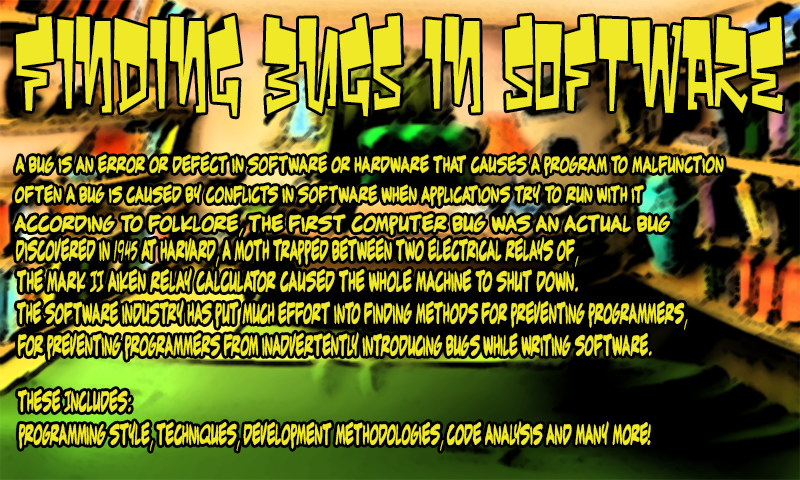
<style>
.page{position:relative;width:800px;height:480px;background:#000000}
.page>*{position:absolute;margin:0}
.t1{font:98.1px "Bomr";color:#f0e927;scale:0.64 1}
.t2{font:21.6px "adamwarren0.2";color:#f0e927;scale:0.57 1}
.t3{font:21.3px "adamwarren0.2";color:#f0e927;scale:0.77 1}
.t4{font:27px "adamwarren0.2";color:#f0e927;scale:0.42 1}
.t5{font:27px "adamwarren0.2";color:#f0e927;scale:0.45 1}
</style>
<div class="page">
<p class="t1" style="left:16px;top:15px;width:767px;height:102px">Finding bugs in software</p>
<p class="t2" style="left:15px;top:154px;width:709px;height:22px">A Bug is an error or defect in software or hardware that causes a program to malfunction</p>
<p class="t2" style="left:14px;top:184px;width:630px;height:22px">Often a bug is caused by conflicts in software when applications try to run with it</p>
<p class="t3" style="left:14px;top:213px;width:656px;height:24px">According to folklore, the first computer bug was an actual bug</p>
<p class="t4" style="left:15px;top:237px;width:564px;height:30px">Discovered in 1945 at Harvard, a moth trapped between two electrical relays of,</p>
<p class="t5" style="left:16px;top:268px;width:562px;height:25px">the Mark II Aiken Relay Calculator caused the whole machine to shut down.</p>
<p class="t4" style="left:16px;top:300px;width:672px;height:30px">The software industry has put much effort into finding methods for preventing programmers,</p>
<p class="t4" style="left:17px;top:332px;width:635px;height:28px">for preventing programmers from inadvertently introducing bugs while writing software.</p>
<p class="t4" style="left:17px;top:389px;width:114px;height:24px">These Includes:</p>
<p class="t4" style="left:18px;top:421px;width:633px;height:30px">Programming style, Techniques, Development Methodologies, Code Analysis and many more!</p>
</div>
